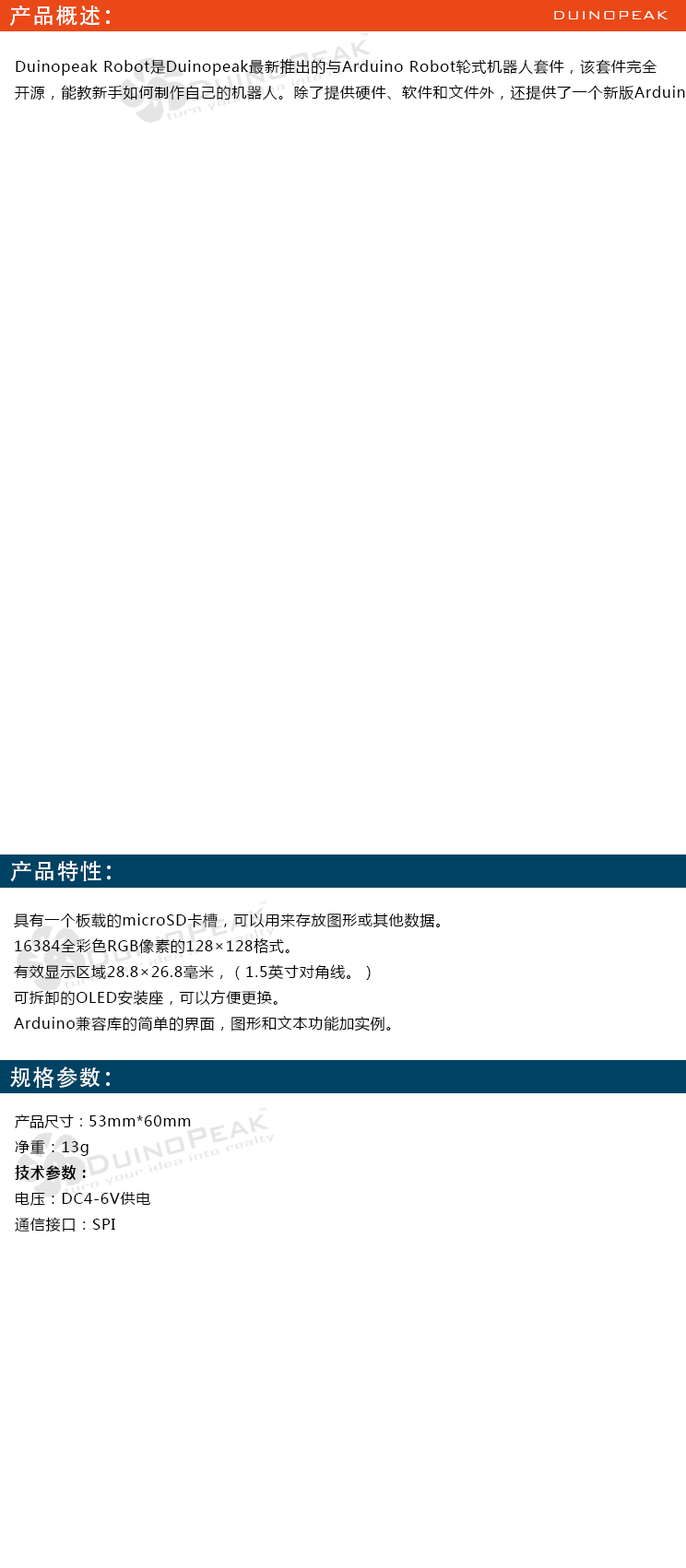
<style>
.page{position:relative;width:686px;height:1568px;background:#ffffff}
.page>*{position:absolute;margin:0}
.t1{font:22.1px "AdobeHeitiStd-Regular";letter-spacing:0.05em;color:#ffffff}
.t2{font:16.6px "BankGothicBT-Light";letter-spacing:0.05em;color:#ffffff}
.t3{font:14.7px "MicrosoftYaHei";letter-spacing:0.05em;color:#000000}
.t4{font:14.7px "MicrosoftYaHei";color:#000000}
.t5{font:14.7px "MicrosoftYaHei-Bold";letter-spacing:0.05em;color:#000000}
</style>
<div class="page">
<p class="t1" style="left:9px;top:6px;width:101px;height:21px">产品概述：</p>
<p class="t2" style="left:554px;top:11px;width:114px;height:8px">DUINOPEAK</p>
<p class="t1" style="left:10px;top:860px;width:101px;height:22px">产品特性：</p>
<p class="t3" style="left:14px;top:913px;width:426px;height:119px">具有一个板载的microSD卡槽，可以用来存放图形或其他数据。<br>16384全彩色RGB像素的128×128格式。<br>有效显示区域28.8×26.8毫米，（1.5英寸对角线。）<br>可拆卸的OLED安装座，可以方便更换。<br>Arduino兼容库的简单的界面，图形和文本功能加实例。</p>
<p class="t1" style="left:10px;top:1067px;width:100px;height:21px">规格参数：</p>
<p class="t3" style="left:15px;top:1114px;width:176px;height:118px"><span class="t4">产品尺寸：</span>53mm*60mm<br>净重：13g<br><span class="t5">技术参数：<br></span>电压：DC4-6V供电<br>通信接口：SPI</p>
</div>
